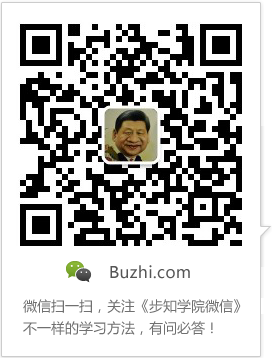
<style>
.page{position:relative;width:272px;height:358px;background:#ffffff}
.page>*{position:absolute;margin:0}
.t1{font:16px "MicrosoftYaHei";letter-spacing:0.025em;color:#555555}
.t2{font:14px/22px "MicrosoftYaHei";color:#707070}
</style>
<div class="page">
<p class="t1" style="left:110px;top:265px;width:80px;height:14px">Buzhi.com</p>
<p class="t2" style="left:23px;top:299px;width:218px;height:36px">微信扫一扫，关注《步知学院微信》<br>不一样的学习方法，有问必答！</p>
</div>
